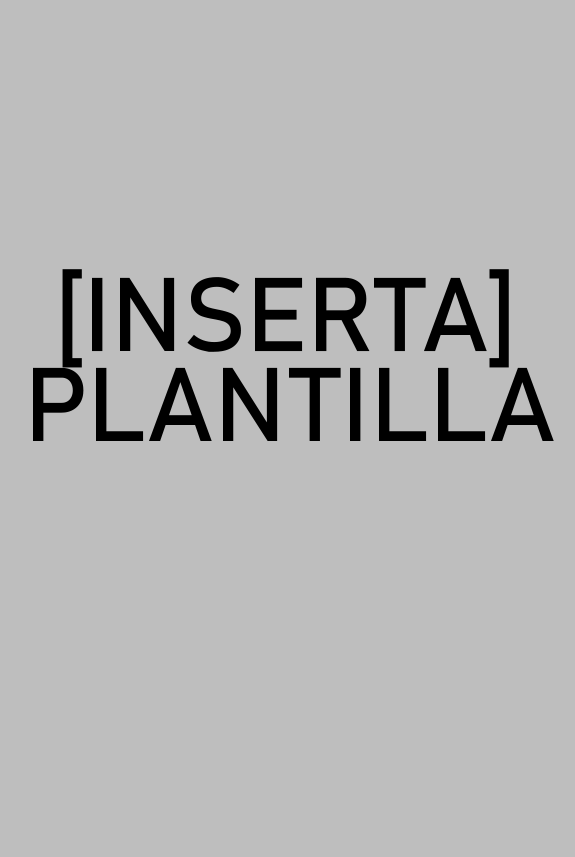
<style>
.page{position:relative;width:575px;height:857px;background:#bebebe}
.page>*{position:absolute;margin:0}
.t1{font:103px "Bahnschrift";color:#000000}
</style>
<div class="page">
<p class="t1" style="left:62px;top:269px;width:447px;height:99px">[INSERTA]</p>
<p class="t1" style="left:33px;top:367px;width:521px;height:74px">PLANTILLA</p>
</div>
